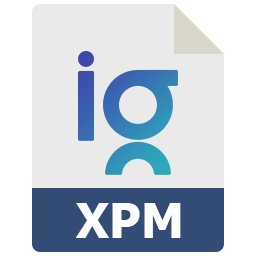
<style>
.page{position:relative;width:256px;height:256px;background:#eaeaea}
.page>*{position:absolute;margin:0}
.t1{font:48px "Tahoma-Bold";color:#ffffff}
</style>
<div class="page">
<p class="t1" style="left:76px;top:203px;width:105px;height:35px">XPM</p>
</div>
